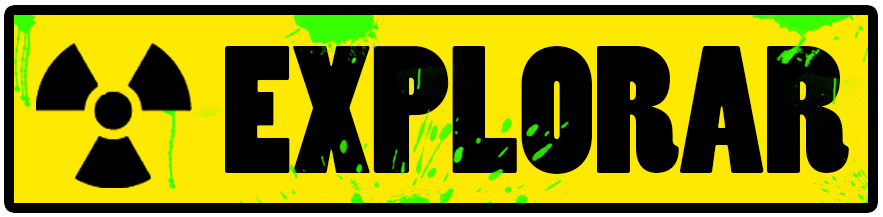
<style>
.page{position:relative;width:883px;height:217px;background:#000000}
.page>*{position:absolute;margin:0}
.t1{font:169.5px "PoplarStd";color:#000000}
</style>
<div class="page">
<p class="t1" style="left:225px;top:46px;width:624px;height:128px">EXPLORAR</p>
</div>
